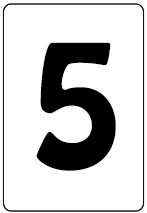
<style>
.page{position:relative;width:147px;height:213px;background:#ffffff}
.page>*{position:absolute;margin:0}
.t1{font:154.6px "HoboStd";color:#000000;scale:1.05 1}
</style>
<div class="page">
<p class="t1" style="left:36px;top:42px;width:80px;height:129px">5</p>
</div>
